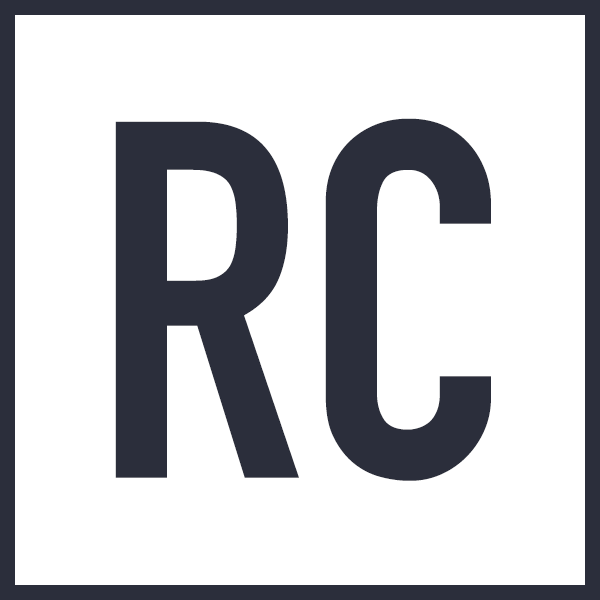
<style>
.page{position:relative;width:600px;height:600px;background:#ffffff}
.page>*{position:absolute;margin:0}
.t1{font:500px "DINCondensed-Bold";color:#2b2e3b}
</style>
<div class="page">
<p class="t1" style="left:115px;top:118px;width:376px;height:363px">RC</p>
</div>
